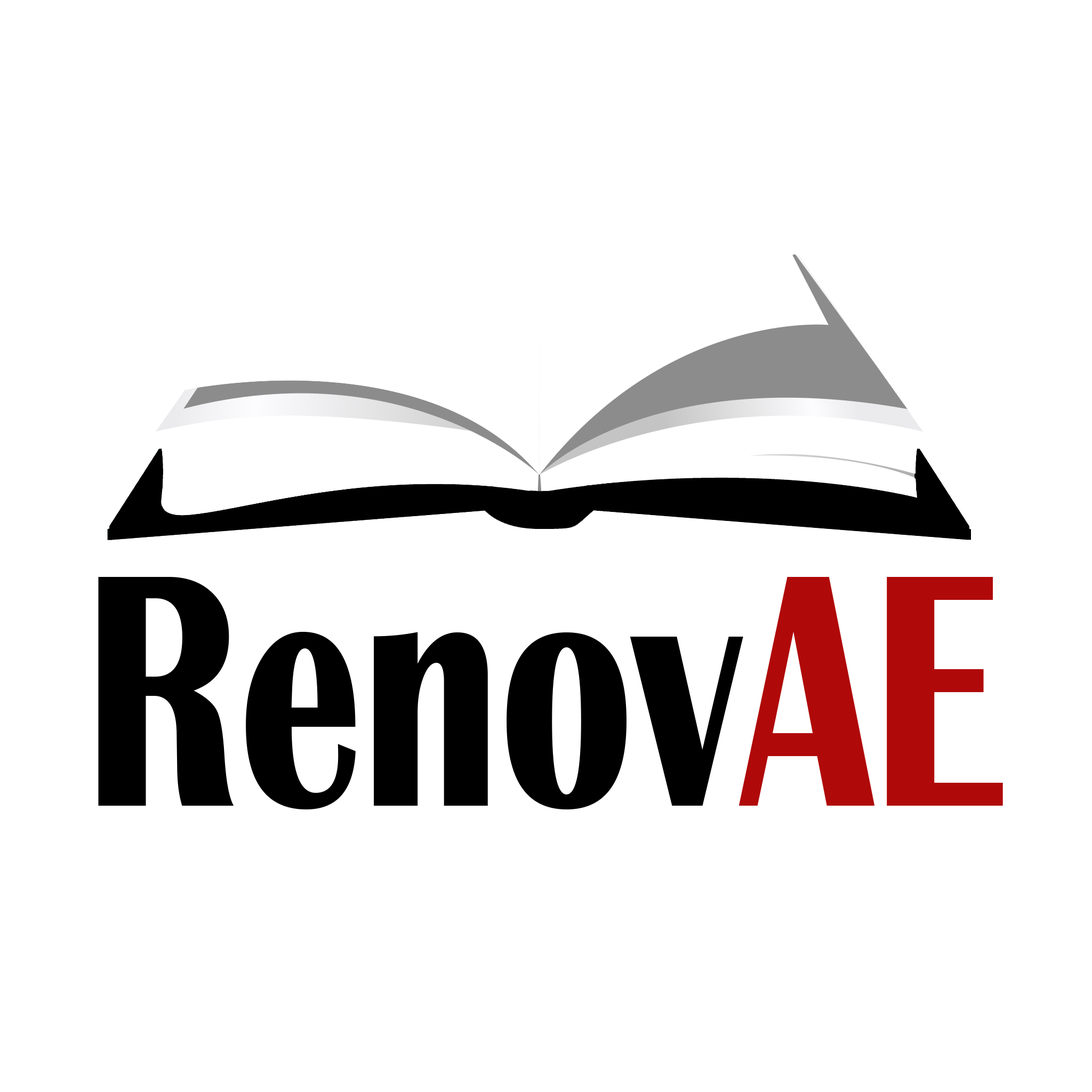
<style>
.page{position:relative;width:1092px;height:1092px;background:#ffffff}
.page>*{position:absolute;margin:0}
.t1{font:343.4px "BritannicBold";color:#000000;scale:0.71 1}
.t2{font:343.4px "BritannicBold";color:#b00909;scale:0.71 1}
</style>
<div class="page">
<p class="t1" style="left:98px;top:577px;width:905px;height:232px">Renov<span class="t2">AE</span></p>
</div>
